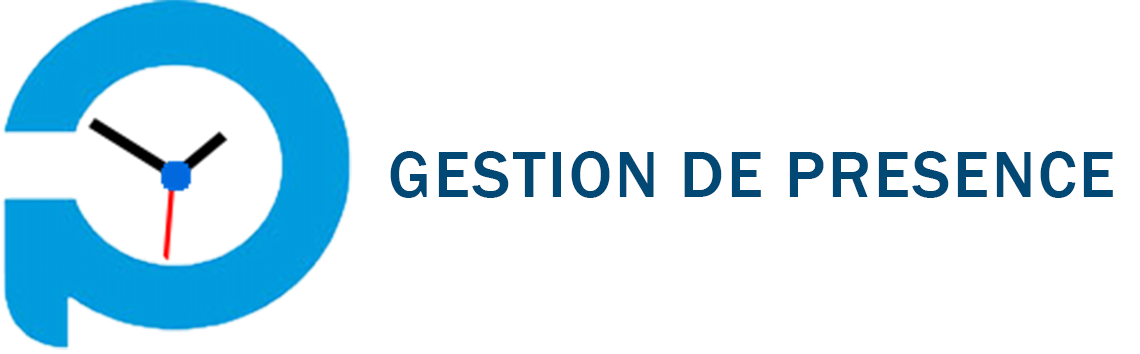
<style>
.page{position:relative;width:1140px;height:354px;background:#ffffff}
.page>*{position:absolute;margin:0}
.t1{font:67px "FranklinGothic-Medium";letter-spacing:0.04em;color:#014874}
</style>
<div class="page">
<p class="t1" style="left:390px;top:151px;width:723px;height:47px">GESTION DE PRESENCE</p>
</div>
